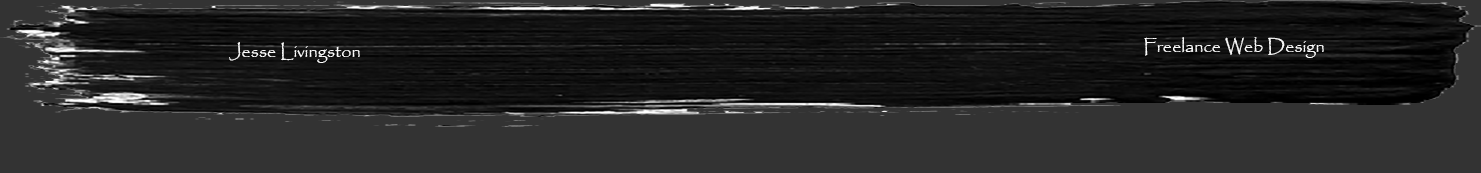
<style>
.page{position:relative;width:1481px;height:173px;background:#333333}
.page>*{position:absolute;margin:0}
.t1{font:18px "Papyrus-Regular";color:#fefefe}
</style>
<div class="page">
<p class="t1" style="left:1144px;top:37px;width:180px;height:21px">Freelance Web Design</p>
<p class="t1" style="left:229px;top:42px;width:131px;height:21px">Jesse Livingston</p>
</div>
